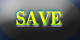
<style>
.page{position:relative;width:80px;height:40px}
.page>*{position:absolute;margin:0}
.t1{font:18px "MyungjoXB-HM"}
</style>
<div class="page">
<p class="t1" style="left:16px;top:11px;width:45px;height:14px">SAVE</p>
</div>
